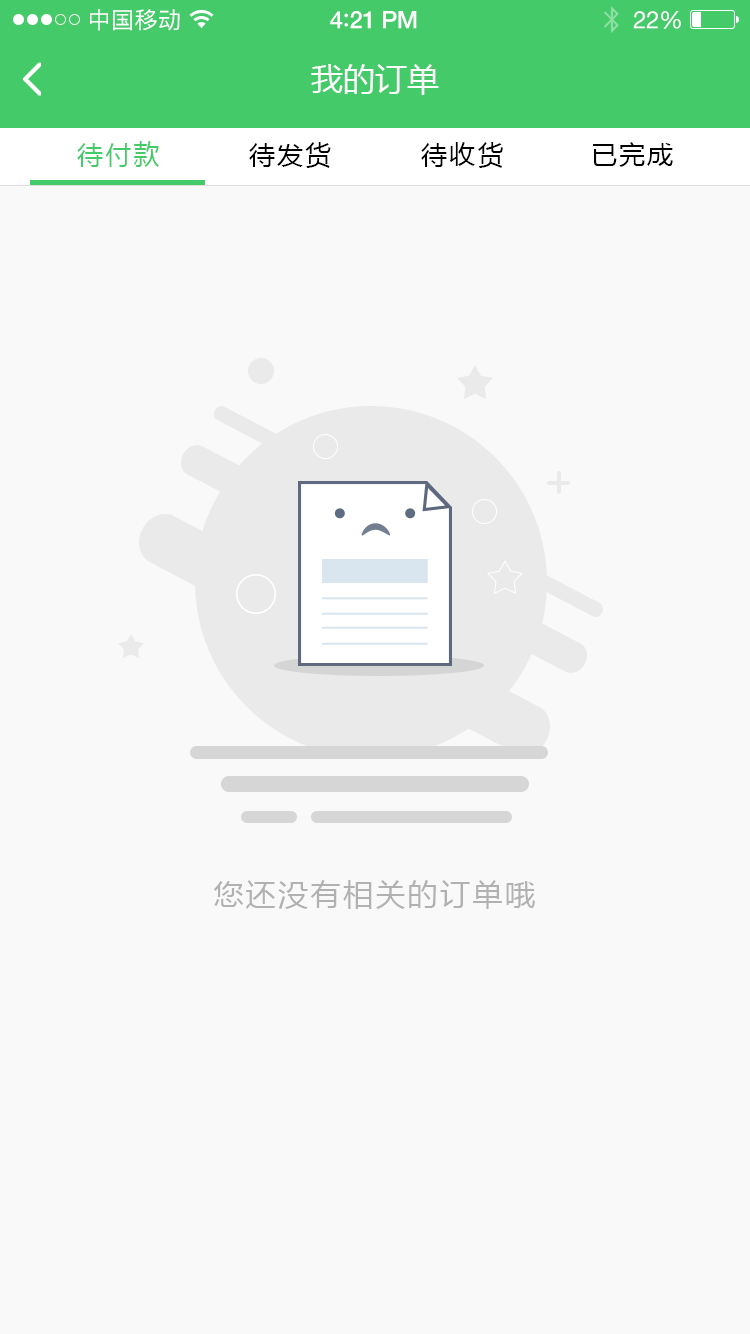
<style>
.page{position:relative;width:750px;height:1334px;background:#f9f9f9}
.page>*{position:absolute;margin:0}
.t1{font:23px "PingFangSC-Regular";letter-spacing:0.02em;color:#ffffff}
.t2{font:24px "HelveticaNeue-Medium";letter-spacing:-0.02em;color:#ffffff}
.t3{font:26px "Avenir-Medium";letter-spacing:-0.02em;color:#ffffff}
.t4{font:24px "HelveticaNeue";letter-spacing:-0.02em;color:#ffffff}
.t5{font:32px "MicrosoftYaHei";color:#ffffff;text-transform:uppercase}
.t6{font:26px "MicrosoftYaHei";letter-spacing:0.08em;color:#44ca68;text-transform:uppercase}
.t7{font:26px "MicrosoftYaHei";letter-spacing:0.08em;color:#000000;text-transform:uppercase}
.t8{font:30px "MicrosoftYaHei";letter-spacing:0.08em;color:#b1b1b1;text-transform:uppercase}
</style>
<div class="page">
<p class="t1" style="left:90px;top:9px;width:90px;height:22px">中国移动</p>
<p class="t2" style="left:330px;top:11px;width:87px;height:18px">4<span class="t3">:</span>21 PM</p>
<p class="t4" style="left:633px;top:11px;width:48px;height:18px">22%</p>
<p class="t5" style="left:311px;top:64px;width:128px;height:31px">我的订单</p>
<p class="t6" style="left:77px;top:141px;width:82px;height:26px">待付款</p>
<p class="t7" style="left:249px;top:142px;width:82px;height:26px">待发货</p>
<p class="t7" style="left:421px;top:142px;width:82px;height:26px">待收货</p>
<p class="t7" style="left:593px;top:142px;width:80px;height:25px">已完成</p>
<p class="t8" style="left:213px;top:880px;width:322px;height:29px">您还没有相关的订单哦</p>
</div>
